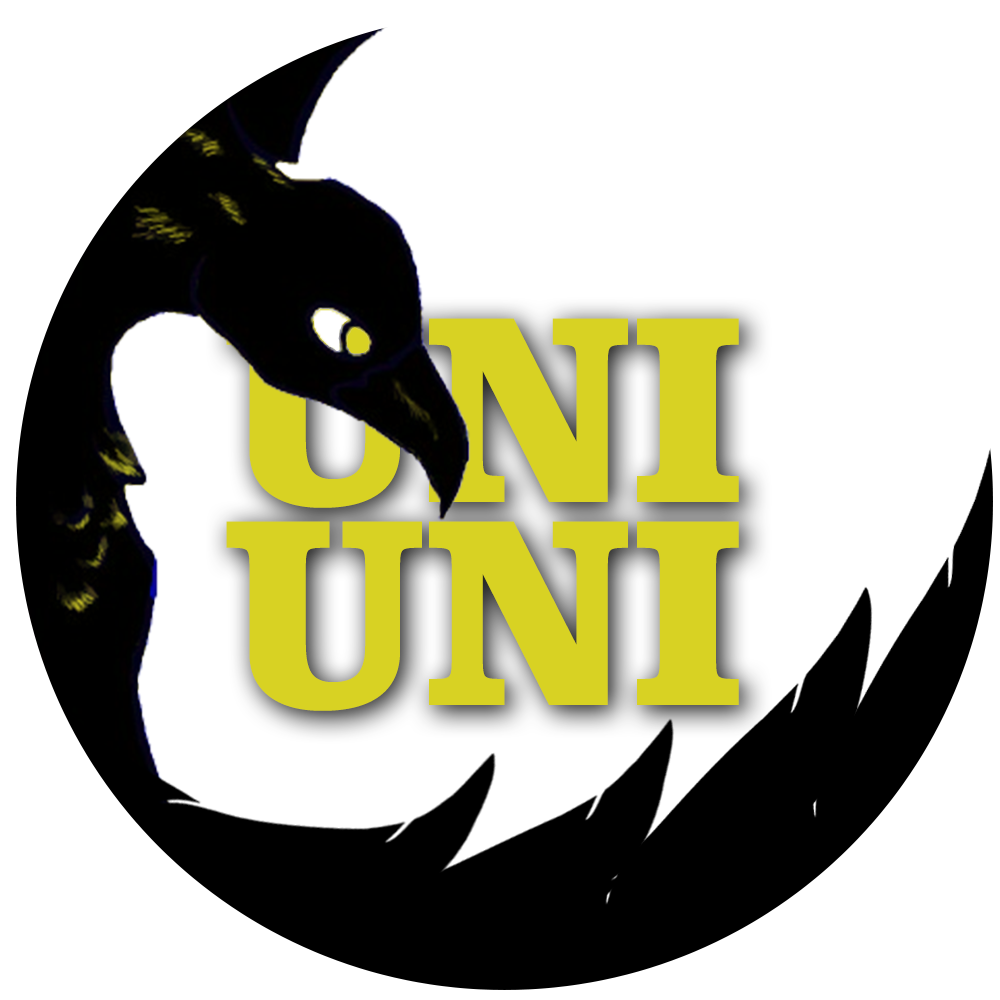
<style>
.page{position:relative;width:1000px;height:1000px;background:#ffffff}
.page>*{position:absolute;margin:0}
.t1{font:273.2px/202.3px "ClarendonBT-Black";color:#d8d223;scale:0.93 1}
</style>
<div class="page">
<p class="t1" style="left:226px;top:318px;width:513px;height:393px;text-align:center">UNI<br>UNI</p>
</div>
